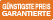
<style>
.page{position:relative;width:53px;height:20px;background:#e37222}
.page>*{position:absolute;margin:0}
.t1{font:7.9px "FranklinGothic-MediumCond";letter-spacing:-0.04em;color:#ffffff;text-transform:uppercase;font-weight:bold;scale:0.88 1}
.t2{font:7.9px "FranklinGothic-MediumCond";color:#fefefe;text-transform:uppercase;scale:1.22 1}
</style>
<div class="page">
<p class="t1" style="left:2px;top:2px;width:49px;height:8px">Günstigste Preis</p>
<p class="t2" style="left:2px;top:11px;width:49px;height:5px">garantierte</p>
</div>
